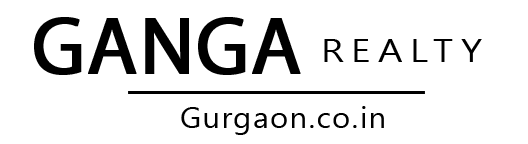
<style>
.page{position:relative;width:528px;height:144px;background:#ffffff}
.page>*{position:absolute;margin:0}
.t1{font:82.1px "MyriadHebrew-Regular";color:#000000;font-weight:bold}
.t2{font:32.2px "LeelawadeeUI";letter-spacing:0.2em;color:#000000;scale:1.17 1}
.t3{font:30.3px "LeelawadeeUI";letter-spacing:0.05em;color:#000000}
</style>
<div class="page">
<p class="t1" style="left:34px;top:17px;width:267px;height:58px">GANGA</p>
<p class="t2" style="left:324px;top:39px;width:158px;height:23px">REALTY</p>
<p class="t3" style="left:181px;top:106px;width:203px;height:29px">Gurgaon.co.in</p>
</div>
